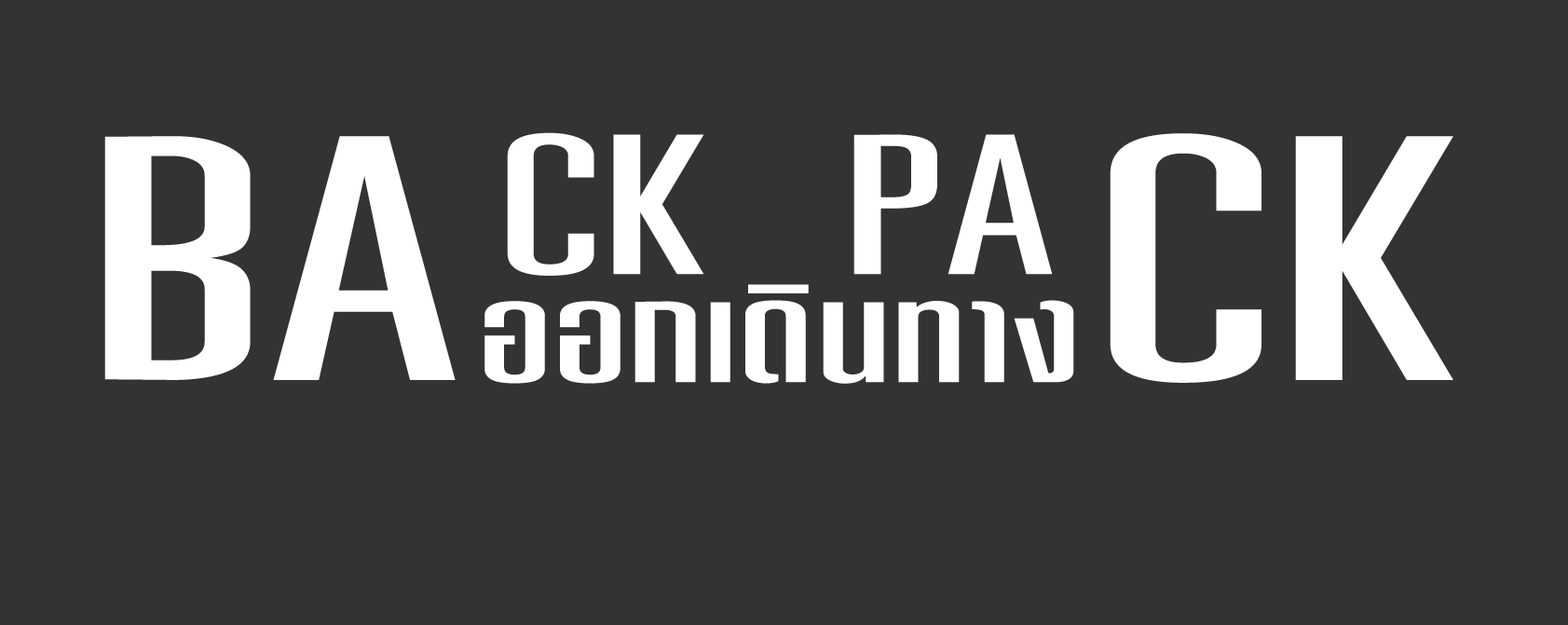
<style>
.page{position:relative;width:1568px;height:625px;background:#333333}
.page>*{position:absolute;margin:0}
.t1{font:326.1px "DSNPatPongExtend";letter-spacing:0.02em;color:#ffffff}
.t2{font:186.3px "DSNPatPongExtend";letter-spacing:0.02em;color:#ffffff}
.t3{font:139.8px "DSNPatPongExtend";letter-spacing:0.02em;color:#ffffff}
</style>
<div class="page">
<p class="t1" style="left:104px;top:133px;width:1349px;height:250px">BA        CK</p>
<p class="t2" style="left:507px;top:132px;width:546px;height:144px">CK   PA</p>
<p class="t3" style="left:484px;top:284px;width:590px;height:100px">ออกเดินทาง</p>
</div>
